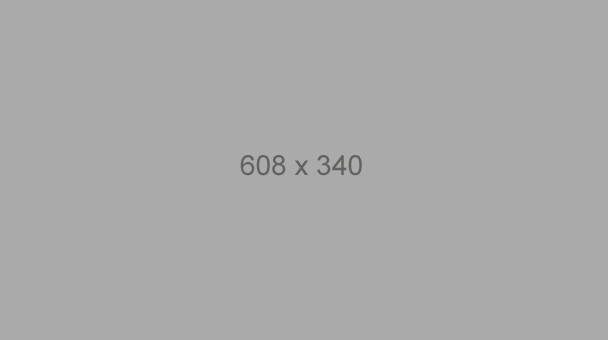
<style>
.page{position:relative;width:608px;height:340px;background:#aaaaaa}
.page>*{position:absolute;margin:0}
.t1{font:28px "ArialMT";color:#636260}
</style>
<div class="page">
<p class="t1" style="left:240px;top:155px;width:122px;height:21px">608 x 340</p>
</div>
